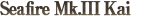
<style>
.page{position:relative;width:147px;height:18px;background:#ffffff}
.page>*{position:absolute;margin:0}
.t1{font:18px "RyuminPro-ExBold";letter-spacing:-0.08em;color:#4a3f32;font-weight:bold;scale:0.9 1}
</style>
<div class="page">
<p class="t1" style="left:0px;top:1px;width:131px;height:15px">Seafire Mk.III Kai</p>
</div>
